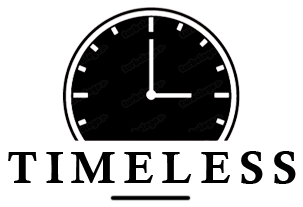
<style>
.page{position:relative;width:303px;height:207px;background:#ffffff}
.page>*{position:absolute;margin:0}
.t1{font:45.3px "CalisMTBol";letter-spacing:0.18em;color:#000000}
</style>
<div class="page">
<p class="t1" style="left:8px;top:151px;width:288px;height:33px">TIMELESS</p>
</div>
